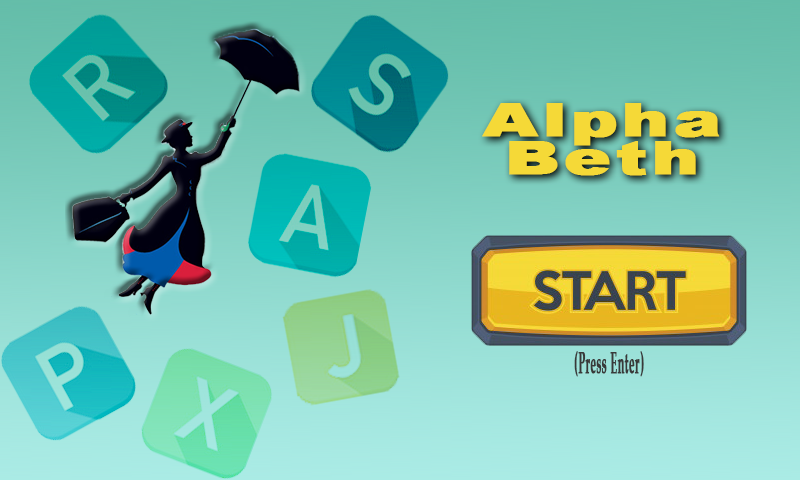
<style>
.page{position:relative;width:800px;height:480px}
.page>*{position:absolute;margin:0}
.t1{font:46.4px/38px "Arial-Black";letter-spacing:0.04em;color:#f5d937;font-weight:bold;scale:1.52 1}
.t2{font:30.5px "PalatinoLinotype-Bold";letter-spacing:0.04em;color:#393939;font-weight:bold;scale:0.35 1}
</style>
<div class="page">
<p class="t1" style="left:482px;top:103px;width:238px;height:73px;text-align:center">Alpha<br>Beth</p>
<p class="t2" style="left:574px;top:351px;width:70px;height:26px">(Press Enter)</p>
</div>
